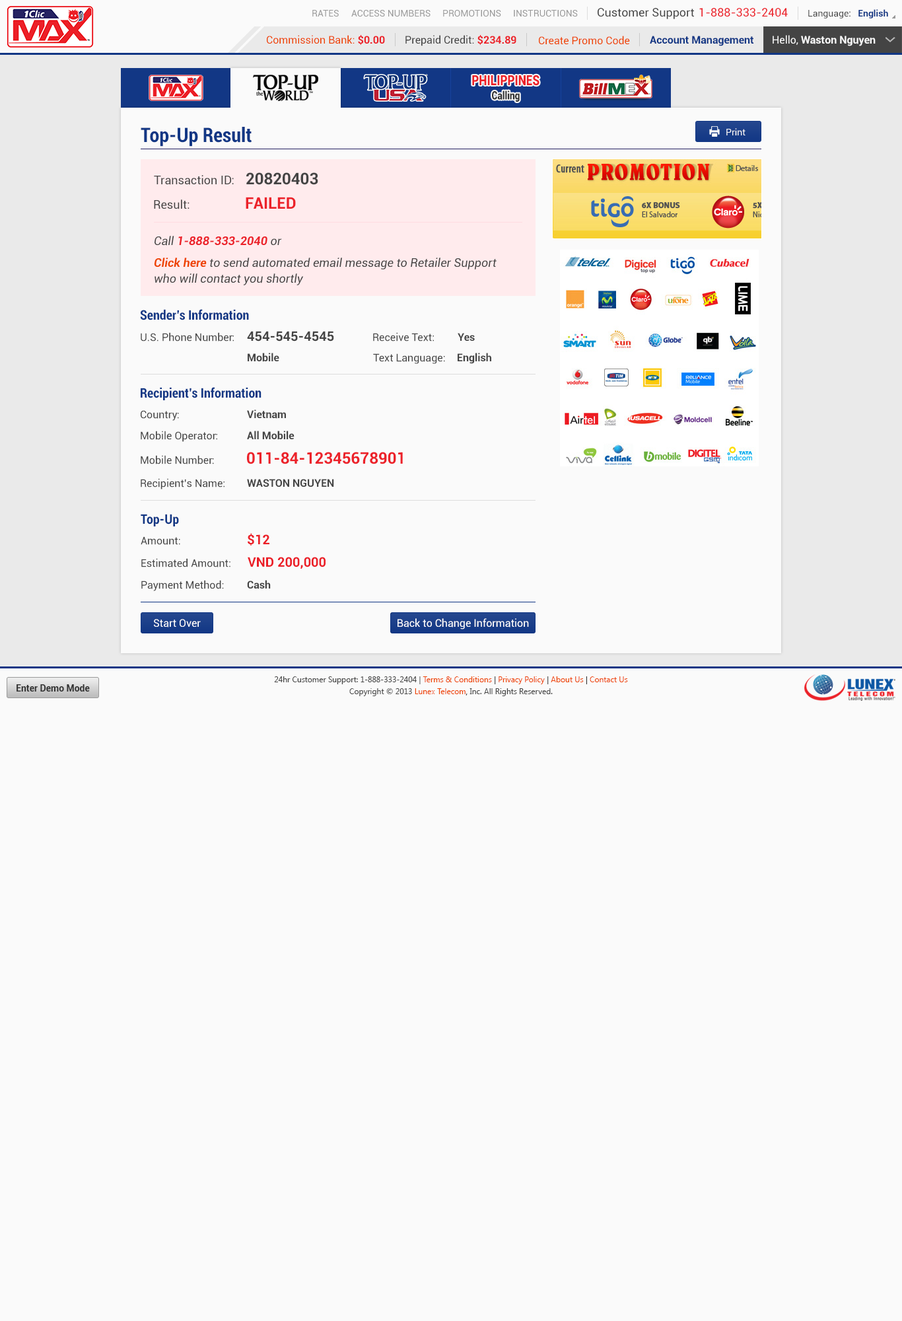
<style>
.page{position:relative;width:902px;height:1321px;background:#fafafa}
.page>*{position:absolute;margin:0}
.t1{font:9.2px "Roboto-Regular";color:#999999}
.t2{font:11.6px "Roboto-Regular";color:#444444}
.t3{font:11.6px "Roboto-Regular";color:#ec2029}
.t4{font:9.2px "Roboto-Regular";color:#444444}
.t5{font:9.2px "Roboto-Bold";color:#123785}
.t6{font:10.6px "Roboto-Regular";color:#ee4400}
.t7{font:10.6px "Roboto-Bold";color:#ec2028}
.t8{font:10.6px "Roboto-Regular";color:#444444}
.t9{font:10.6px "Roboto-Bold";color:#123785}
.t10{font:10.6px "Roboto-Bold";color:#fafafa}
.t11{font:10.6px "Roboto-Regular";color:#fafafa}
.t12{font:14.1px "Roboto-Black";color:#ec2028;scale:0.81 1}
.t13{font:11.3px "Roboto-Black";color:#333333;scale:0.81 1}
.t14{font:19.8px "Roboto-BoldCondensed";color:#123785}
.t15{font:9.2px "Roboto-Regular";color:#fafafa}
.t16{font:15.9px "Roboto-Bold";color:#444444}
.t17{font:11.9px "Roboto-Regular";color:#444444}
.t18{font:15.9px "Roboto-Bold";color:#ec222a}
.t19{font:11.9px "Roboto-BoldItalic";color:#ec222a}
.t20{font:11.9px "Roboto-Italic";color:#444444}
.t21{font:11.9px/15.9px "Roboto-Italic";color:#444444}
.t22{font:11.9px/15.9px "Roboto-BoldItalic";color:#ee4400}
.t23{font:13.2px "Roboto-BoldCondensed";color:#123785}
.t24{font:13.2px "Roboto-Bold";color:#444444}
.t25{font:10.6px "Roboto-Bold";color:#444444}
.t26{font:13.2px "Roboto-Bold";color:#eb1e27}
.t27{font:10.6px "Roboto-Regular";color:#ffffff}
.t28{font:7.9px/11.9px "SegoeUI";color:#444444}
.t29{font:7.9px/11.9px "SegoeUI";color:#ee4400}
.t30{font:7.9px/11.9px "SegoeUI";color:#333333}
.t31{font:9.2px "Roboto-Bold";color:#333333}
</style>
<div class="page">
<p class="t1" style="left:312px;top:10px;width:27px;height:7px">RATES</p>
<p class="t1" style="left:351px;top:10px;width:80px;height:7px">ACCESS NUMBERS</p>
<p class="t1" style="left:443px;top:10px;width:58px;height:7px">PROMOTIONS</p>
<p class="t1" style="left:514px;top:10px;width:64px;height:7px">INSTRUCTIONS</p>
<p class="t2" style="left:598px;top:8px;width:96px;height:11px">Customer Support</p>
<p class="t3" style="left:700px;top:8px;width:88px;height:9px">1-888-333-2404</p>
<p class="t4" style="left:809px;top:9px;width:80px;height:9px">Language:   <span class="t5">English</span></p>
<p class="t6" style="left:267px;top:35px;width:118px;height:10px">Commission Bank: <span class="t7">$0.00</span></p>
<p class="t8" style="left:406px;top:35px;width:111px;height:11px">Prepaid Credit: <span class="t7">$234.89</span></p>
<p class="t6" style="left:539px;top:36px;width:91px;height:9px">Create Promo Code</p>
<p class="t9" style="left:650px;top:36px;width:104px;height:10px">Account Management</p>
<p class="t10" style="left:773px;top:35px;width:103px;height:11px"><span class="t11">Hello, </span>Waston Nguyen</p>
<p class="t12" style="left:472px;top:75px;width:68px;height:11px">PHILIPPINES</p>
<p class="t13" style="left:492px;top:91px;width:28px;height:11px">Calling</p>
<p class="t14" style="left:141px;top:127px;width:111px;height:20px">Top-Up Result</p>
<p class="t15" style="left:727px;top:128px;width:19px;height:7px">Print</p>
<p class="t16" style="left:246px;top:172px;width:72px;height:13px">20820403</p>
<p class="t17" style="left:154px;top:175px;width:80px;height:10px">Transaction ID:</p>
<p class="t18" style="left:246px;top:197px;width:50px;height:12px">FAILED</p>
<p class="t17" style="left:154px;top:200px;width:36px;height:9px">Result:</p>
<p class="t19" style="left:155px;top:236px;width:127px;height:10px"><span class="t20">Call </span>1-888-333-2040<span class="t20"> or</span></p>
<p class="t21" style="left:154px;top:258px;width:343px;height:27px"><span class="t22">Click here</span> to send automated email message to Retailer Support<br>who will contact you shortly</p>
<p class="t23" style="left:140px;top:309px;width:109px;height:11px">Sender’s Information</p>
<p class="t8" style="left:141px;top:332px;width:93px;height:10px">U.S. Phone Number:</p>
<p class="t24" style="left:247px;top:331px;width:87px;height:11px">454-545-4545</p>
<p class="t8" style="left:373px;top:332px;width:61px;height:10px">Receive Text:</p>
<p class="t25" style="left:458px;top:333px;width:17px;height:8px">Yes</p>
<p class="t25" style="left:248px;top:353px;width:31px;height:9px">Mobile</p>
<p class="t8" style="left:373px;top:353px;width:72px;height:11px">Text Language:</p>
<p class="t25" style="left:458px;top:353px;width:34px;height:11px">English</p>
<p class="t23" style="left:141px;top:387px;width:121px;height:13px">Recipient’s Information</p>
<p class="t8" style="left:141px;top:410px;width:38px;height:11px">Country:</p>
<p class="t25" style="left:247px;top:410px;width:39px;height:9px">Vietnam</p>
<p class="t8" style="left:141px;top:431px;width:76px;height:11px">Mobile Operator:</p>
<p class="t25" style="left:247px;top:431px;width:48px;height:9px">All Mobile</p>
<p class="t8" style="left:141px;top:455px;width:73px;height:9px">Mobile Number:</p>
<p class="t18" style="left:247px;top:452px;width:156px;height:12px">011-84-12345678901</p>
<p class="t8" style="left:141px;top:478px;width:84px;height:12px">Recipient’s Name:</p>
<p class="t25" style="left:247px;top:479px;width:87px;height:8px">WASTON NGUYEN</p>
<p class="t23" style="left:141px;top:514px;width:38px;height:13px">Top-Up</p>
<p class="t26" style="left:248px;top:533px;width:22px;height:13px">$12</p>
<p class="t8" style="left:141px;top:536px;width:39px;height:9px">Amount:</p>
<p class="t26" style="left:248px;top:557px;width:78px;height:12px">VND 200,000</p>
<p class="t8" style="left:141px;top:558px;width:90px;height:10px">Estimated Amount:</p>
<p class="t8" style="left:141px;top:580px;width:83px;height:11px">Payment Method:</p>
<p class="t25" style="left:247px;top:580px;width:24px;height:9px">Cash</p>
<p class="t27" style="left:154px;top:619px;width:47px;height:9px">Start Over</p>
<p class="t27" style="left:398px;top:618px;width:131px;height:12px">Back to Change Information</p>
<p class="t28" style="left:274px;top:677px;width:354px;height:19px;text-align:center">24hr Customer Support: 1-888-333-2404 | <span class="t29">Terms &amp; Conditions</span><span class="t30"> | </span><span class="t29">Privacy Policy</span><span class="t30"> | </span><span class="t29">About Us</span><span class="t30"> | </span><span class="t29">Contact Us<br></span>Copyright © 2013 <span class="t29">Lunex Telecom</span><span class="t30">,</span> Inc. All Rights Reserved.</p>
<p class="t31" style="left:17px;top:684px;width:73px;height:8px">Enter Demo Mode</p>
</div>
